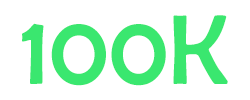
<style>
.page{position:relative;width:250px;height:100px;background:#ffffff}
.page>*{position:absolute;margin:0}
.t1{font:100px "BerlinSansFB-Reg";color:#3ae76f}
</style>
<div class="page">
<p class="t1" style="left:22px;top:15px;width:206px;height:71px">100K</p>
</div>
